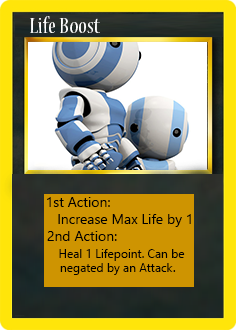
<style>
.page{position:relative;width:236px;height:330px}
.page>*{position:absolute;margin:0}
.t1{font:24px "NuevaStd-Cond";color:#ffffff}
.t2{font:14px "LeelawadeeUI";color:#000000}
.t3{font:12px "LeelawadeeUI";color:#000000}
</style>
<div class="page">
<p class="t1" style="left:30px;top:16px;width:70px;height:17px">Life Boost</p>
<p class="t2" style="left:47px;top:197px;width:144px;height:30px">1st Action:<br>   Increase Max Life by 1</p>
<p class="t3" style="left:47px;top:231px;width:138px;height:44px"><span class="t2">2nd Action:<br>   </span>Heal 1 Lifepoint. Can be <br>    negated by an Attack.</p>
</div>
